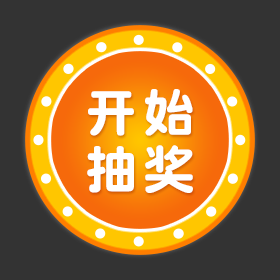
<style>
.page{position:relative;width:280px;height:280px;background:#333333}
.page>*{position:absolute;margin:0}
.t1{font:52px/57.2px "DFPYuanW9";letter-spacing:0.1em;color:#ffffff}
</style>
<div class="page">
<p class="t1" style="left:87px;top:89px;width:106px;height:104px;text-align:center">开始<br>抽奖</p>
</div>
